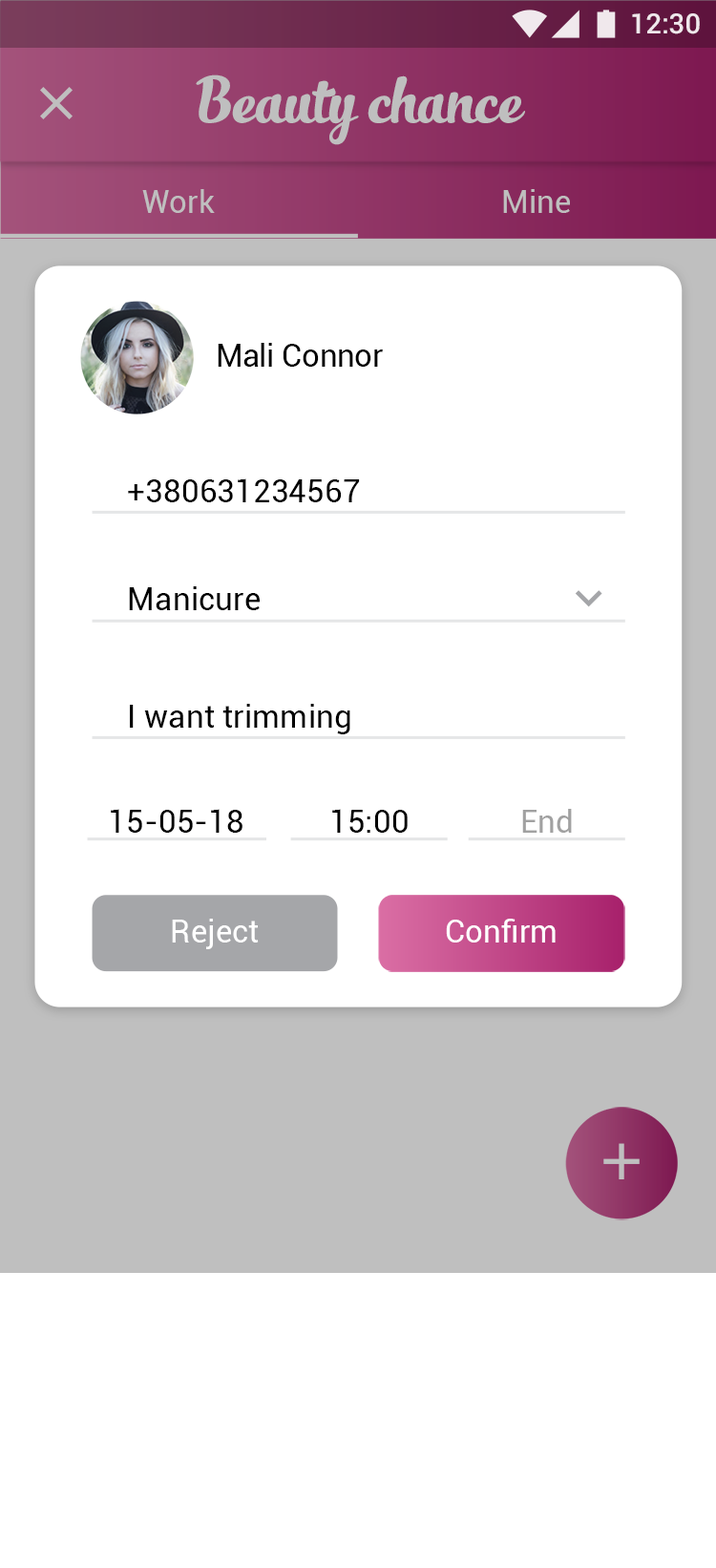
<style>
.page{position:relative;width:716px;height:1568px;background:#ffffff}
.page>*{position:absolute;margin:0}
.t1{font:27.8px "Roboto-Medium";color:#ffffff}
.t2{font:31.8px "Roboto-Regular";letter-spacing:-0.005em;color:#000000}
.t3{font:31.8px "Roboto-Regular";color:#000000}
.t4{font:31.8px "Roboto-Regular";color:#a1a1a1}
.t5{font:31.8px "Roboto-Regular";color:#ffffff}
</style>
<div class="page">
<p class="t1" style="left:632px;top:13px;width:68px;height:21px">12:30</p>
<p class="t2" style="left:218px;top:343px;width:165px;height:24px">Mali Connor</p>
<p class="t3" style="left:128px;top:478px;width:232px;height:24px">+380631234567</p>
<p class="t3" style="left:129px;top:586px;width:131px;height:24px">Manicure</p>
<p class="t3" style="left:130px;top:704px;width:220px;height:30px">I want trimming</p>
<p class="t3" style="left:111px;top:809px;width:132px;height:24px">15-05-18</p>
<p class="t3" style="left:332px;top:809px;width:76px;height:24px">15:00</p>
<p class="t4" style="left:522px;top:809px;width:50px;height:24px">End</p>
<p class="t5" style="left:172px;top:919px;width:87px;height:30px">Reject</p>
<p class="t5" style="left:446px;top:919px;width:110px;height:24px">Confirm</p>
</div>
